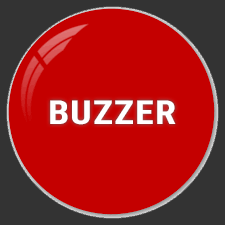
<style>
.page{position:relative;width:225px;height:225px;background:#c40000}
.page>*{position:absolute;margin:0}
.t1{font:33.1px "RobotoCondensed-Bold";letter-spacing:0.025em;color:#ffffff;scale:1.15 1}
</style>
<div class="page">
<p class="t1" style="left:50px;top:100px;width:126px;height:25px">BUZZER</p>
</div>
